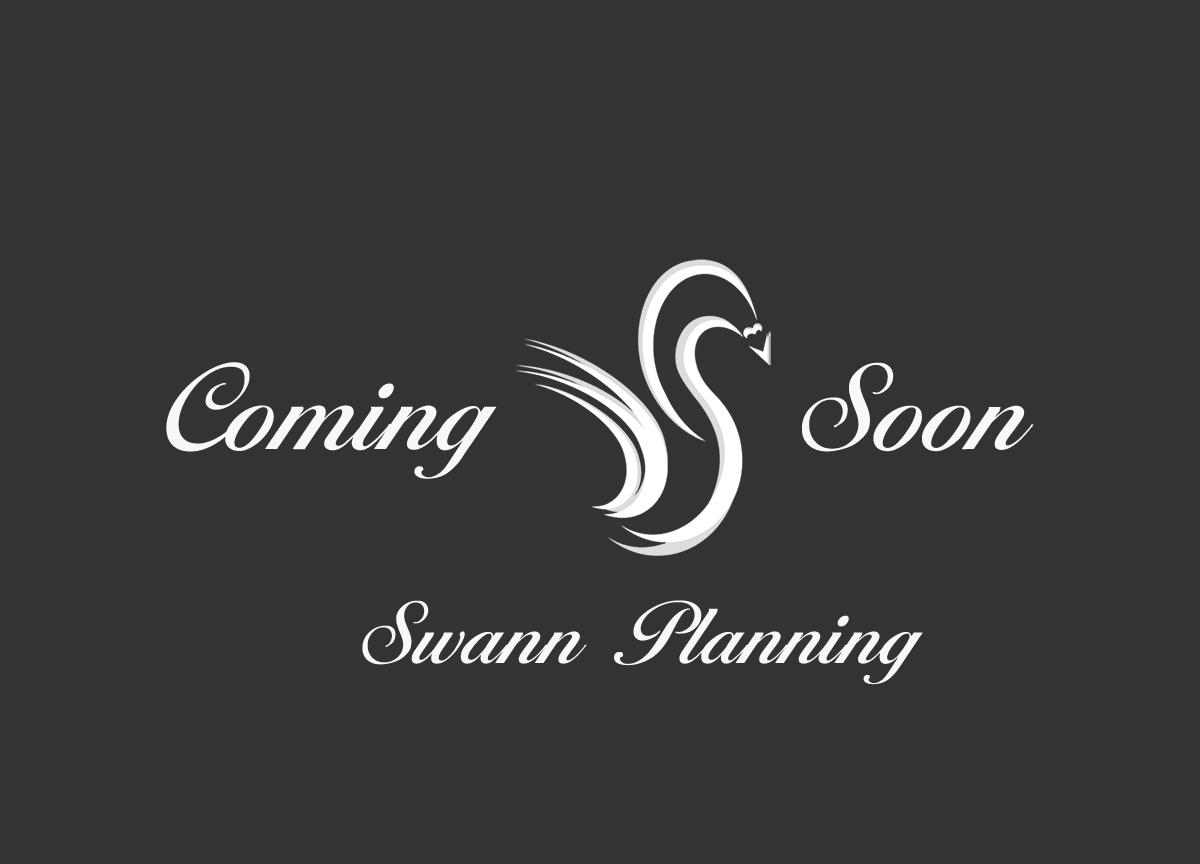
<style>
.page{position:relative;width:1200px;height:864px;background:#333333}
.page>*{position:absolute;margin:0}
.t1{font:166.7px "Ballantines-Serial-Medium-Regular";color:#f9f7f7}
.t2{font:120px "Ballantines-Serial-Medium-Regular";color:#f9f7f7}
</style>
<div class="page">
<p class="t1" style="left:166px;top:362px;width:331px;height:117px">Coming</p>
<p class="t1" style="left:802px;top:362px;width:232px;height:90px">Soon</p>
<p class="t2" style="left:362px;top:600px;width:561px;height:85px">Swann Planning</p>
</div>
